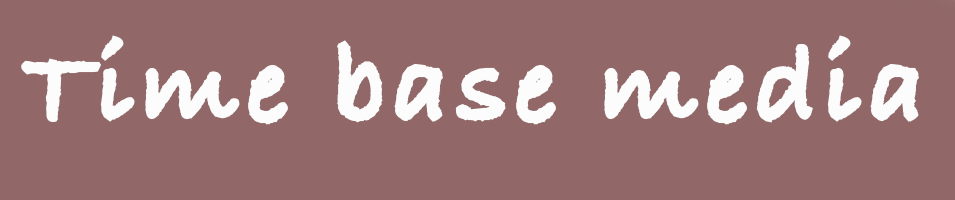
<style>
.page{position:relative;width:955px;height:200px;background:#916767}
.page>*{position:absolute;margin:0}
.t1{font:108.3px "BradleyHandITCTT-Bold";letter-spacing:0.05em;color:#fcfcfc;font-weight:bold}
</style>
<div class="page">
<p class="t1" style="left:21px;top:35px;width:898px;height:90px">Time base media</p>
</div>
